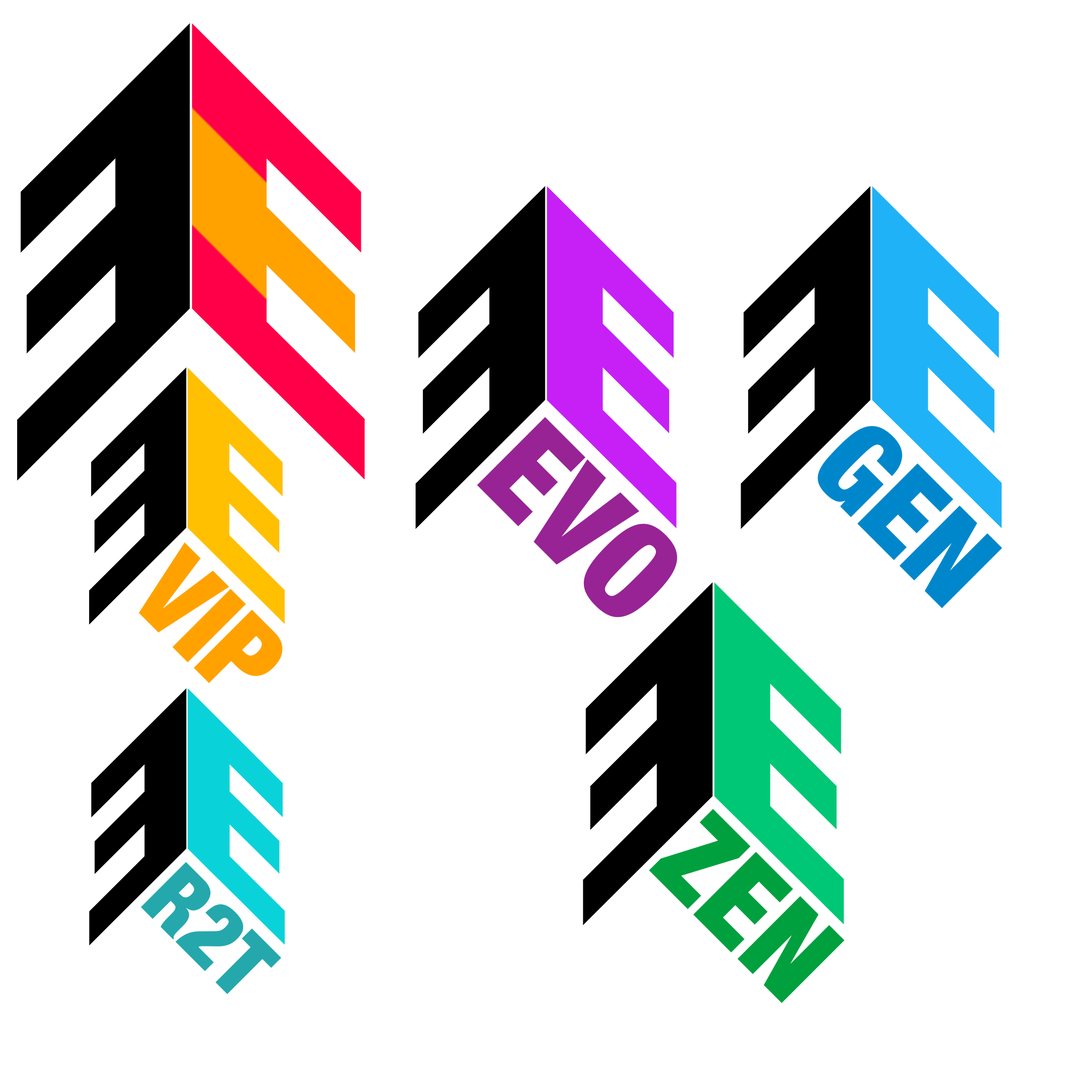
<style>
.page{position:relative;width:1092px;height:1092px;background:#ffffff}
.page>*{position:absolute;margin:0}
.t1{font:134.5px "HelveticaNeue-CondensedBlack";color:#982395}
.t2{font:119.1px "HelveticaNeue-CondensedBlack";color:#0087cb}
.t3{font:115.1px "HelveticaNeue-CondensedBlack";color:#ffa200}
.t4{font:124px "HelveticaNeue-CondensedBlack";color:#00a03e}
.t5{font:89.1px "HelveticaNeue-CondensedBlack";color:#24a8ac}
</style>
<div class="page">
<p class="t1" style="left:477px;top:417px;width:200px;height:200px;rotate:45deg">EVO</p>
<p class="t2" style="left:817px;top:426px;width:185px;height:182px;rotate:45deg">GEN</p>
<p class="t3" style="left:139px;top:542px;width:144px;height:141px;rotate:45deg">VIP</p>
<p class="t4" style="left:649px;top:809px;width:196px;height:194px;rotate:45deg">ZEN</p>
<p class="t5" style="left:141px;top:862px;width:141px;height:132px;rotate:45deg">R2T</p>
</div>
